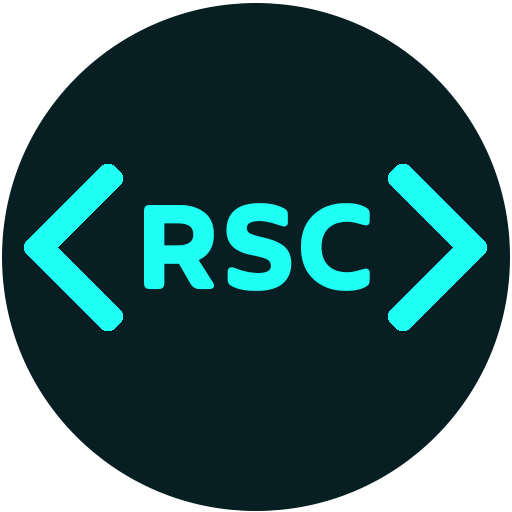
<style>
.page{position:relative;width:512px;height:512px;background:#071e22}
.page>*{position:absolute;margin:0}
.t1{font:120px "Feather-Bold";color:#1ffff4}
</style>
<div class="page">
<p class="t1" style="left:144px;top:203px;width:226px;height:88px">RSC</p>
</div>
